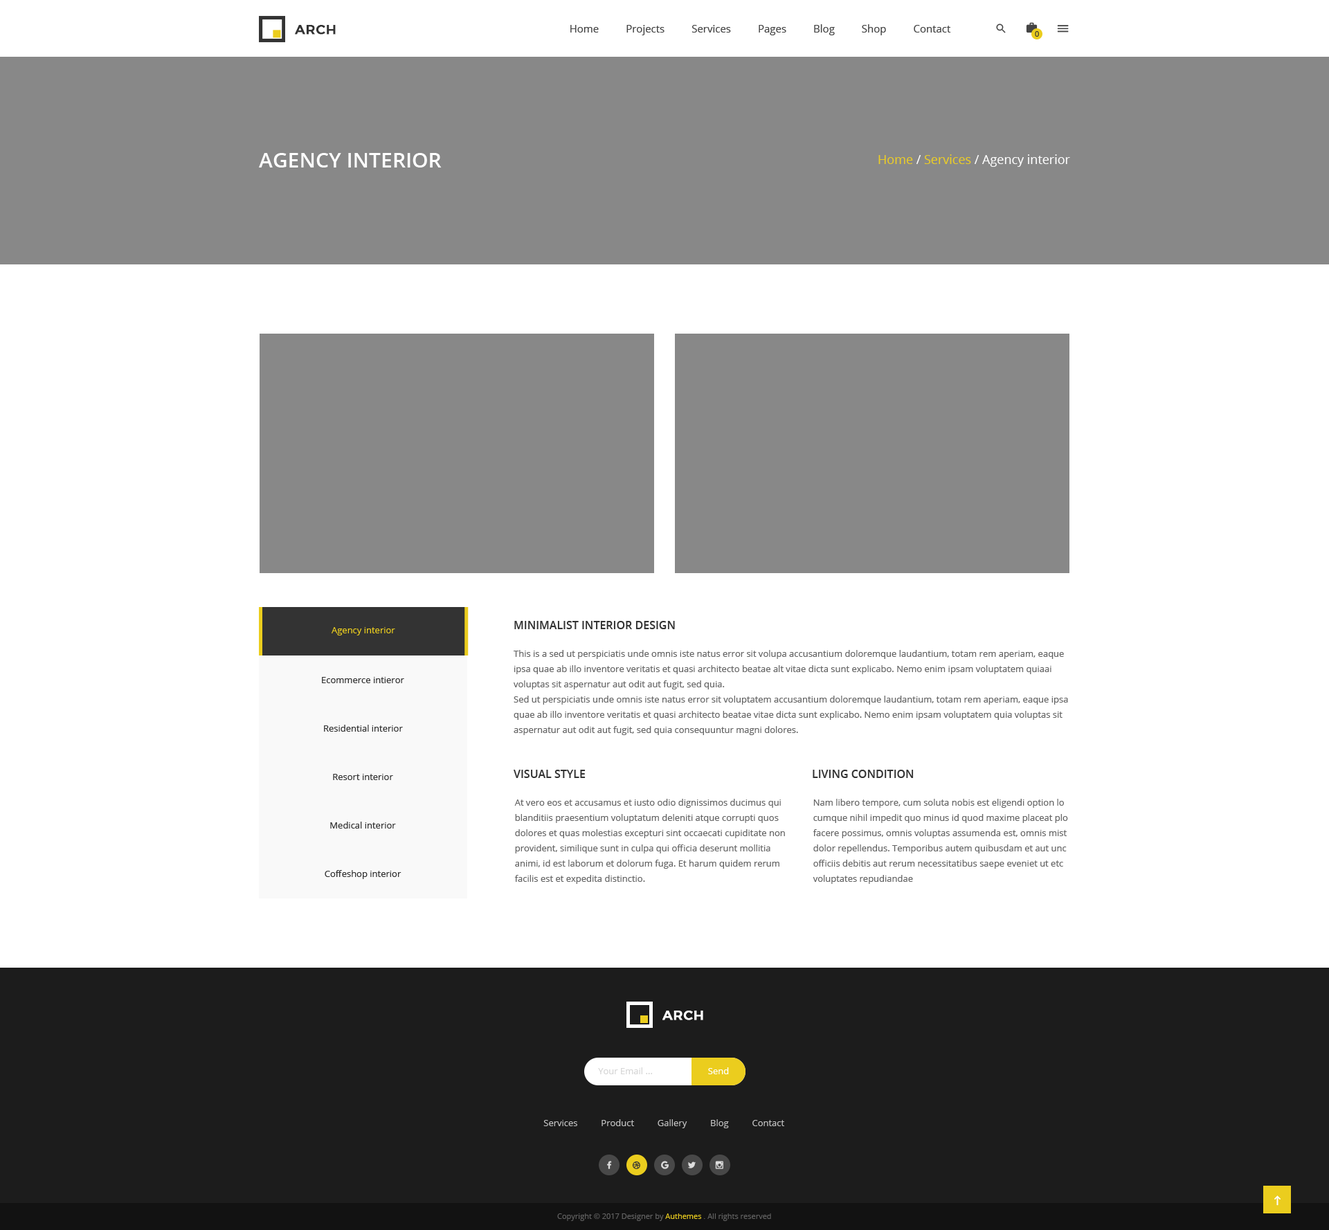
<style>
.page{position:relative;width:1329px;height:1230px;background:#ffffff}
.page>*{position:absolute;margin:0}
.t1{font:13.2px "Montserrat-Medium";letter-spacing:0.025em;color:#333333;text-transform:uppercase;font-weight:bold}
.t2{font:10.4px "OpenSans";color:#444444}
.t3{font:7.6px "OpenSans";color:#333333}
.t4{font:20.8px "OpenSans-Semibold";color:#ffffff;text-transform:uppercase}
.t5{font:12.5px "OpenSans-Regular";color:#ffffff}
.t6{font:12.5px "OpenSans-Regular";color:#ebcd1e}
.t7{font:9px "OpenSans";color:#ebcd1e}
.t8{font:11.1px "OpenSans-Semibold";color:#333333;text-transform:uppercase}
.t9{font:9px/15.2px "OpenSans";color:#666666}
.t10{font:9px "OpenSans";color:#333333}
.t11{font:13.2px "Montserrat-Medium";letter-spacing:0.025em;color:#ffffff;text-transform:uppercase;font-weight:bold}
.t12{font:9px "OpenSans";color:#d6d6d6}
.t13{font:9px "OpenSans";color:#ffffff}
.t14{font:9px "OpenSans";color:#c2c2c2}
.t15{font:7.6px "OpenSans";color:#626262}
.t16{font:7.6px "OpenSans";color:#ebcd1e}
</style>
<div class="page">
<p class="t1" style="left:295px;top:25px;width:41px;height:10px">arch</p>
<p class="t2" style="left:570px;top:24px;width:381px;height:11px">Home          Projects          Services          Pages          Blog          Shop          Contact</p>
<p class="t3" style="left:1035px;top:31px;width:4px;height:6px">0</p>
<p class="t4" style="left:259px;top:153px;width:183px;height:15px">agency interior</p>
<p class="t5" style="left:879px;top:154px;width:191px;height:13px"><span class="t6">Home </span>/<span class="t6"> Services </span>/ Agency interior</p>
<p class="t7" style="left:332px;top:627px;width:63px;height:9px">Agency interior</p>
<p class="t8" style="left:514px;top:621px;width:161px;height:8px">Minimalist interior design</p>
<p class="t9" style="left:514px;top:650px;width:554px;height:85px">This is a sed ut perspiciatis unde omnis iste natus error sit volupa accusantium doloremque laudantium, totam rem aperiam, eaque ipsa quae ab illo inventore veritatis et quasi architecto beatae alt vitae dicta sunt explicabo. Nemo enim ipsam voluptatem quiaai voluptas sit aspernatur aut odit aut fugit, sed quia.<br>Sed ut perspiciatis unde omnis iste natus error sit voluptatem accusantium doloremque laudantium, totam rem aperiam, eaque ipsa quae ab illo inventore veritatis et quasi architecto beatae vitae dicta sunt explicabo. Nemo enim ipsam voluptatem quia voluptas sit aspernatur aut odit aut fugit, sed quia consequuntur magni dolores.</p>
<p class="t10" style="left:322px;top:677px;width:82px;height:6px">Ecommerce intieror</p>
<p class="t10" style="left:324px;top:725px;width:79px;height:7px">Residential interior</p>
<p class="t10" style="left:333px;top:774px;width:60px;height:6px">Resort interior</p>
<p class="t8" style="left:514px;top:770px;width:72px;height:8px">Visual style</p>
<p class="t8" style="left:813px;top:770px;width:101px;height:8px">Living condition</p>
<p class="t9" style="left:514px;top:799px;width:271px;height:85px">At vero eos et accusamus et iusto odio dignissimos ducimus qui blanditiis praesentium voluptatum deleniti atque corrupti quos dolores et quas molestias excepturi sint occaecati cupiditate non provident, similique sunt in culpa qui officia deserunt mollitia animi, id est laborum et dolorum fuga. Et harum quidem rerum facilis est et expedita distinctio.</p>
<p class="t9" style="left:813px;top:799px;width:255px;height:85px">Nam libero tempore, cum soluta nobis est eligendi option lo cumque nihil impedit quo minus id quod maxime placeat plo facere possimus, omnis voluptas assumenda est, omnis mist dolor repellendus. Temporibus autem quibusdam et aut unc officiis debitis aut rerum necessitatibus saepe eveniet ut etc voluptates repudiandae</p>
<p class="t10" style="left:330px;top:822px;width:66px;height:7px">Medical interior</p>
<p class="t10" style="left:325px;top:870px;width:77px;height:9px">Coffeshop interior</p>
<p class="t11" style="left:663px;top:1011px;width:40px;height:9px">arch</p>
<p class="t12" style="left:598px;top:1068px;width:55px;height:6px">Your Email ...</p>
<p class="t13" style="left:708px;top:1068px;width:21px;height:6px">Send</p>
<p class="t14" style="left:543px;top:1119px;width:241px;height:9px">Services          Product          Gallery          Blog          Contact</p>
<p class="t15" style="left:557px;top:1214px;width:214px;height:7px">Copyright © 2017 Designer by <span class="t16">Authemes </span>. All rights reserved</p>
</div>
